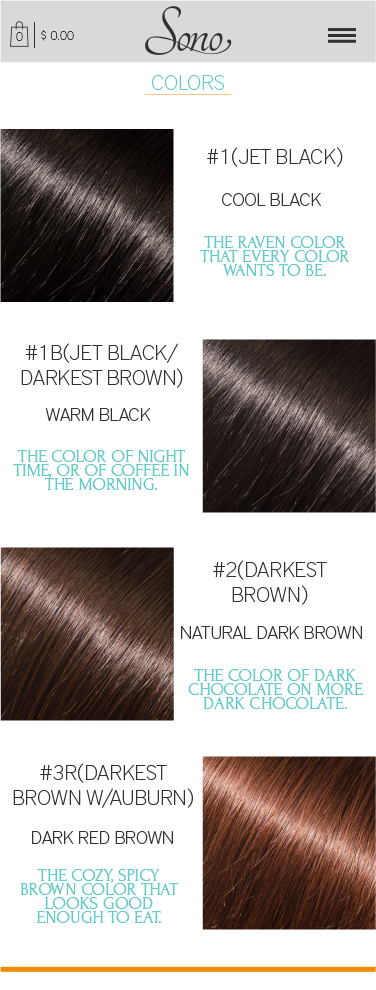
<style>
.page{position:relative;width:376px;height:990px;background:#ffffff}
.page>*{position:absolute;margin:0}
.t1{font:12.4px "DistrictPro-Thin";color:#323232}
.t2{font:21px "DistrictPro-Thin";color:#65cbc9}
.t3{font:21px "DistrictPro-Thin";color:#323232}
.t4{font:18px "DistrictPro-Thin";color:#323232}
.t5{font:18px/14px "Forum";color:#65cbc9}
.t6{font:18px/14px "Forum";color:#65cbc9;text-transform:uppercase}
</style>
<div class="page">
<p class="t1" style="left:41px;top:29px;width:33px;height:12px">$ 0.00</p>
<p class="t1" style="left:16px;top:32px;width:7px;height:9px">0</p>
<p class="t2" style="left:152px;top:75px;width:72px;height:15px">COLORS</p>
<p class="t3" style="left:207px;top:147px;width:136px;height:20px">#1(JET BLACK)</p>
<p class="t4" style="left:222px;top:193px;width:99px;height:13px">COOL BLACK</p>
<p class="t5" style="left:200px;top:236px;width:149px;height:40px;text-align:center">THE RAVEN COLOR THAT EVERY COLOR WANTS TO BE.</p>
<p class="t3" style="left:21px;top:343px;width:162px;height:45px;text-align:center">#1B(JET BLACK/<br>DARKEST BROWN)</p>
<p class="t4" style="left:45px;top:408px;width:106px;height:13px">WARM BLACK</p>
<p class="t6" style="left:13px;top:450px;width:176px;height:41px;text-align:center">The color of night time, or of coffee in the morning.</p>
<p class="t3" style="left:213px;top:560px;width:114px;height:45px;text-align:center">#2(DARKEST BROWN)</p>
<p class="t4" style="left:181px;top:626px;width:181px;height:13px">NATURAL DARK BROWN</p>
<p class="t6" style="left:188px;top:669px;width:175px;height:40px;text-align:center">The color of dark chocolate on more dark chocolate.</p>
<p class="t3" style="left:13px;top:763px;width:180px;height:45px;text-align:center">#3R(DARKEST BROWN W/AUBURN)</p>
<p class="t4" style="left:32px;top:831px;width:141px;height:13px">DARK RED BROWN</p>
<p class="t6" style="left:21px;top:869px;width:157px;height:54px;text-align:center">The cozy, spicy brown color that looks good enough to eat.</p>
</div>
